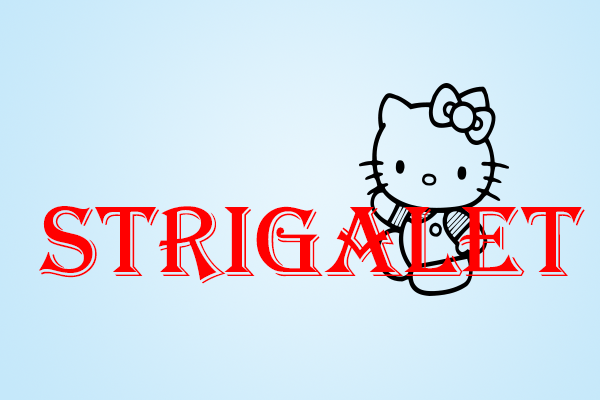
<style>
.page{position:relative;width:600px;height:400px}
.page>*{position:absolute;margin:0}
.t1{font:103.1px "Algerian";color:#ff0000}
</style>
<div class="page">
<p class="t1" style="left:39px;top:206px;width:546px;height:78px">strigalet</p>
</div>
